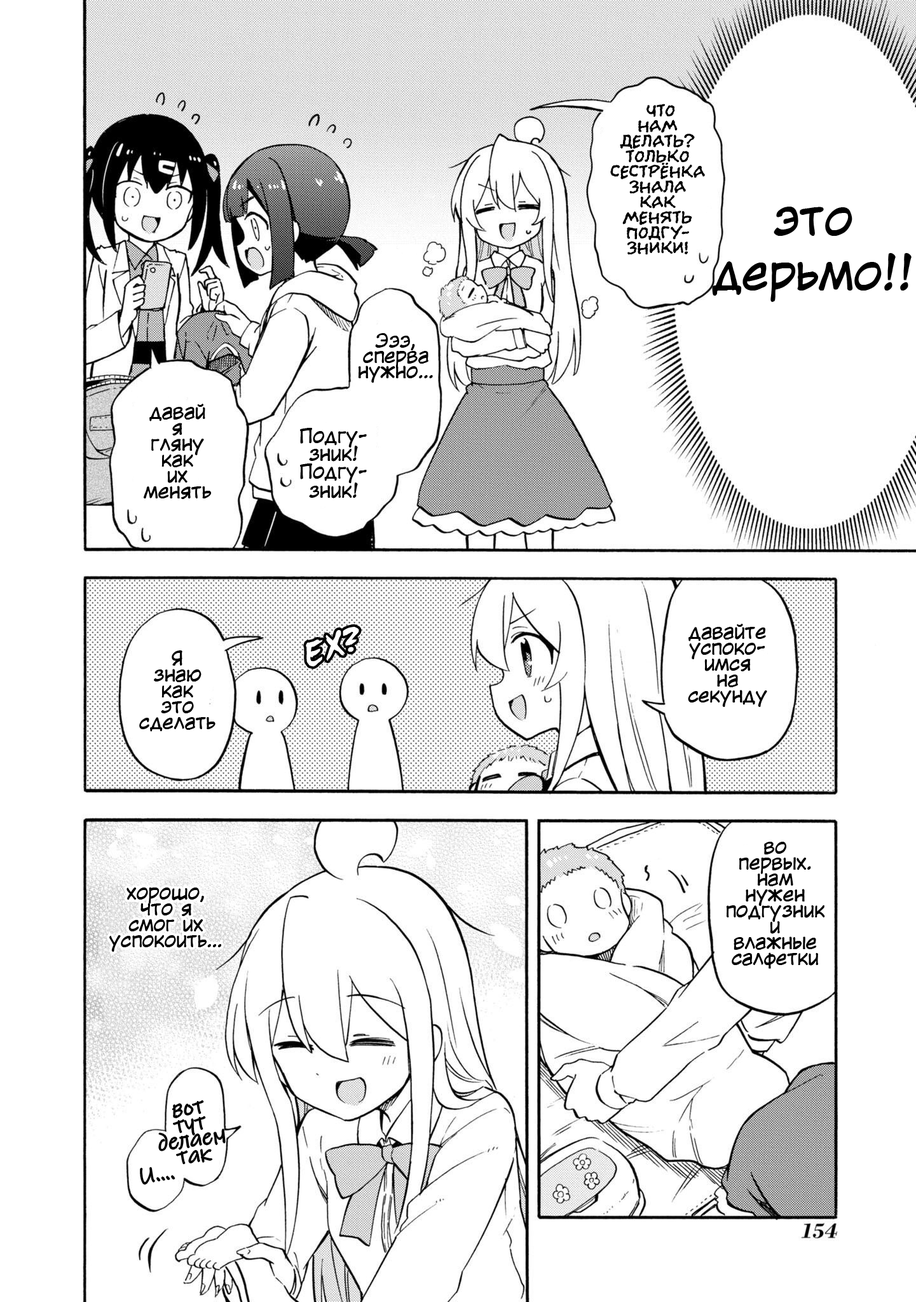
<style>
.page{position:relative;width:916px;height:1302px;background:#ffffff}
.page>*{position:absolute;margin:0}
.t1{font:19.1px/15.3px "el_CCEvilSchemes";color:#000000}
.t2{font:45.8px "KuraiVoice2";color:#000000}
.t3{font:19.1px/15.3px "KuraiVoice2";color:#000000}
.t4{font:19.1px/15.9px "KuraiVoice2";color:#000000}
.t5{font:19.1px/17.8px "KuraiVoice2";color:#000000}
.t6{font:19.1px/19.1px "KuraiVoice2";color:#000000}
.t7{font:30.5px "d_CCTimSaleBrush-Italic";color:#ffffff}
.t8{font:22.9px/15.9px "InkFree";color:#000000}
.t9{font:22.9px "InkFree";color:#000000}
</style>
<div class="page">
<p class="t1" style="left:610px;top:104px;width:95px;height:151px;text-align:center">что<br>нам<br>делать?<br>Только<br>сестрёнка<br>знала<br>как<br>менять<br>подгу-<br>зники!</p>
<p class="t2" style="left:712px;top:207px;width:200px;height:95px;text-align:center">это<br>дерьмо!!</p>
<p class="t3" style="left:358px;top:333px;width:75px;height:50px;text-align:center">Эээ,<br>сперва<br>нужно…</p>
<p class="t4" style="left:143px;top:404px;width:69px;height:95px;text-align:center">давай<br>я<br>гляну<br>как<br>их<br>менять</p>
<p class="t5" style="left:300px;top:428px;width:67px;height:70px;text-align:center">Подгу-<br>зник!<br>Подгу-<br>зник<span class="t6">!</span></p>
<p class="t7" style="left:306px;top:627px;width:53px;height:40px;rotate:-19deg">ЕХ?</p>
<p class="t4" style="left:688px;top:624px;width:79px;height:83px;text-align:center">давайте<br>успоко-<br>имся<br>на<br>секунду</p>
<p class="t4" style="left:139px;top:650px;width:76px;height:82px;text-align:center">Я<br>знаю<br>как<br>это<br>сделать</p>
<p class="t4" style="left:726px;top:842px;width:99px;height:127px;text-align:center">во<br>первых.<br>нам<br>нужен<br>подгузник<br>и<br>влажные<br>салфетки</p>
<p class="t4" style="left:109px;top:887px;width:113px;height:65px;text-align:center">хорошо,<br>что я<br>смог их<br>успокоить…</p>
<p class="t8" style="left:159px;top:1100px;width:66px;height:64px;text-align:center;rotate:-8deg">вот<br>тут<br>делаем<br>так</p>
<p class="t9" style="left:140px;top:1167px;width:35px;height:17px;rotate:-8deg">И….</p>
</div>
